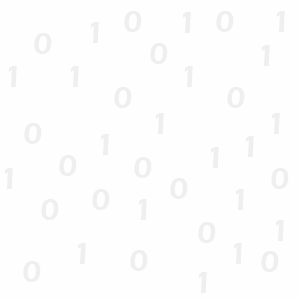
<style>
.page{position:relative;width:300px;height:300px;background:#fffefe}
.page>*{position:absolute;margin:0}
.t1{font:32px "ErasITC-Demi";color:#f0efef}
</style>
<div class="page">
<p class="t1" style="left:124px;top:11px;width:18px;height:21px">0</p>
<p class="t1" style="left:182px;top:12px;width:9px;height:21px">1</p>
<p class="t1" style="left:216px;top:11px;width:18px;height:21px">0</p>
<p class="t1" style="left:276px;top:11px;width:9px;height:21px">1</p>
<p class="t1" style="left:90px;top:22px;width:9px;height:21px">1</p>
<p class="t1" style="left:34px;top:33px;width:18px;height:21px">0</p>
<p class="t1" style="left:150px;top:43px;width:18px;height:21px">0</p>
<p class="t1" style="left:261px;top:45px;width:9px;height:21px">1</p>
<p class="t1" style="left:8px;top:66px;width:9px;height:21px">1</p>
<p class="t1" style="left:70px;top:66px;width:9px;height:21px">1</p>
<p class="t1" style="left:184px;top:66px;width:9px;height:21px">1</p>
<p class="t1" style="left:114px;top:87px;width:18px;height:21px">0</p>
<p class="t1" style="left:227px;top:87px;width:18px;height:21px">0</p>
<p class="t1" style="left:155px;top:113px;width:9px;height:21px">1</p>
<p class="t1" style="left:271px;top:113px;width:9px;height:21px">1</p>
<p class="t1" style="left:24px;top:123px;width:18px;height:21px">0</p>
<p class="t1" style="left:100px;top:134px;width:9px;height:21px">1</p>
<p class="t1" style="left:245px;top:136px;width:9px;height:21px">1</p>
<p class="t1" style="left:210px;top:147px;width:9px;height:21px">1</p>
<p class="t1" style="left:59px;top:155px;width:18px;height:21px">0</p>
<p class="t1" style="left:134px;top:157px;width:18px;height:21px">0</p>
<p class="t1" style="left:4px;top:168px;width:9px;height:21px">1</p>
<p class="t1" style="left:271px;top:168px;width:18px;height:21px">0</p>
<p class="t1" style="left:170px;top:178px;width:18px;height:21px">0</p>
<p class="t1" style="left:92px;top:189px;width:18px;height:21px">0</p>
<p class="t1" style="left:235px;top:189px;width:9px;height:21px">1</p>
<p class="t1" style="left:41px;top:199px;width:18px;height:21px">0</p>
<p class="t1" style="left:138px;top:199px;width:9px;height:21px">1</p>
<p class="t1" style="left:198px;top:222px;width:18px;height:21px">0</p>
<p class="t1" style="left:275px;top:220px;width:9px;height:21px">1</p>
<p class="t1" style="left:77px;top:243px;width:9px;height:21px">1</p>
<p class="t1" style="left:233px;top:243px;width:9px;height:21px">1</p>
<p class="t1" style="left:130px;top:250px;width:18px;height:21px">0</p>
<p class="t1" style="left:261px;top:251px;width:18px;height:21px">0</p>
<p class="t1" style="left:23px;top:261px;width:18px;height:21px">0</p>
<p class="t1" style="left:198px;top:272px;width:9px;height:21px">1</p>
</div>
